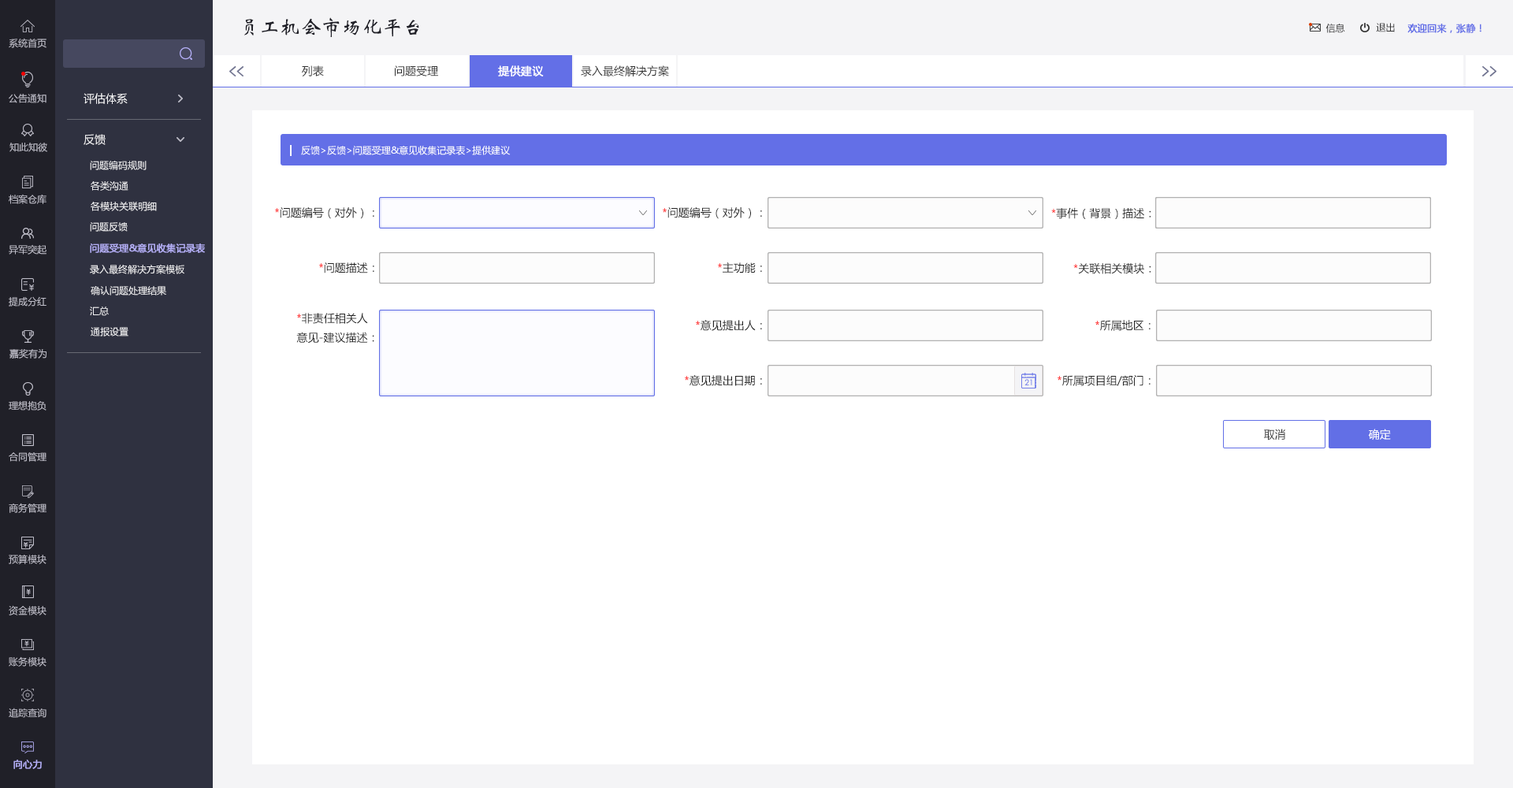
<style>
.page{position:relative;width:1513px;height:788px;background:#ffffff}
.page>*{position:absolute;margin:0}
.t1{font:20.5px "STXinwei";color:#202028}
.t2{font:9.5px "MicrosoftYaHei";color:#333333}
.t3{font:9.5px "MicrosoftYaHei";color:#636fe7;font-weight:bold}
.t4{font:9.5px "MicrosoftYaHei";color:#bfbec9}
.t5{font:11px "MicrosoftYaHei";color:#333333}
.t6{font:11px "MicrosoftYaHei";color:#ffffff;font-weight:bold}
.t7{font:11px "MicrosoftYaHei";color:#f4f4f6}
.t8{font:9.5px "MicrosoftYaHei";color:#ffffff}
.t9{font:9.5px "MicrosoftYaHei";color:#f4f4f6}
.t10{font:11px "MicrosoftYaHei";color:#252525}
.t11{font:11px "MicrosoftYaHei";color:#ff0000}
.t12{font:9.5px "MicrosoftYaHei";color:#b3aef5;font-weight:bold}
.t13{font:11px/14.2px "MicrosoftYaHei";color:#252525}
.t14{font:11px "MicrosoftYaHei";color:#ffffff}
</style>
<div class="page">
<p class="t1" style="left:244px;top:17px;width:175px;height:20px">员工机会市场化平台</p>
<p class="t2" style="left:1326px;top:24px;width:19px;height:9px">信息</p>
<p class="t2" style="left:1376px;top:23px;width:19px;height:9px">退出</p>
<p class="t3" style="left:1407px;top:24px;width:75px;height:9px">欢迎回来，张静！</p>
<p class="t4" style="left:9px;top:38px;width:37px;height:10px">系统首页</p>
<p class="t5" style="left:302px;top:65px;width:22px;height:11px">列表</p>
<p class="t5" style="left:395px;top:65px;width:43px;height:11px">问题受理</p>
<p class="t6" style="left:498px;top:65px;width:46px;height:11px">提供建议</p>
<p class="t5" style="left:581px;top:65px;width:88px;height:11px">录入最终解决方案</p>
<p class="t4" style="left:9px;top:94px;width:37px;height:9px">公告通知</p>
<p class="t7" style="left:84px;top:93px;width:44px;height:11px">评估体系</p>
<p class="t7" style="left:84px;top:134px;width:22px;height:11px">反馈</p>
<p class="t4" style="left:9px;top:143px;width:38px;height:9px">知此知彼</p>
<p class="t8" style="left:301px;top:146px;width:210px;height:9px">反馈&gt;反馈&gt;问题受理&amp;意见收集记录表&gt;提供建议</p>
<p class="t9" style="left:90px;top:161px;width:57px;height:9px">问题编码规则</p>
<p class="t9" style="left:91px;top:181px;width:37px;height:10px">各类沟通</p>
<p class="t4" style="left:9px;top:194px;width:37px;height:10px">档案仓库</p>
<p class="t9" style="left:91px;top:202px;width:66px;height:9px">各模块关联明细</p>
<p class="t10" style="left:275px;top:207px;width:99px;height:12px"><span class="t11">*</span>问题编号（对外）：</p>
<p class="t10" style="left:663px;top:207px;width:99px;height:12px"><span class="t11">*</span>问题编号（对外）：</p>
<p class="t10" style="left:1051px;top:207px;width:100px;height:12px"><span class="t11">*</span>事件（背景）描述：</p>
<p class="t9" style="left:90px;top:222px;width:38px;height:10px">问题反馈</p>
<p class="t4" style="left:9px;top:244px;width:37px;height:11px">异军突起</p>
<p class="t12" style="left:90px;top:244px;width:115px;height:9px">问题受理&amp;意见收集记录表</p>
<p class="t9" style="left:90px;top:264px;width:94px;height:10px">录入最终解决方案模板</p>
<p class="t10" style="left:319px;top:262px;width:55px;height:11px"><span class="t11">*</span>问题描述：</p>
<p class="t10" style="left:718px;top:262px;width:44px;height:11px"><span class="t11">*</span>主功能：</p>
<p class="t10" style="left:1073px;top:262px;width:78px;height:12px">*关联相关模块：</p>
<p class="t9" style="left:91px;top:286px;width:75px;height:10px">确认问题处理结果</p>
<p class="t4" style="left:9px;top:296px;width:37px;height:11px">提成分红</p>
<p class="t9" style="left:90px;top:307px;width:19px;height:9px">汇总</p>
<p class="t13" style="left:296px;top:313px;width:78px;height:31px"><span class="t11">*</span>非责任相关人<br>意见-建议描述：</p>
<p class="t9" style="left:91px;top:327px;width:37px;height:10px">通报设置</p>
<p class="t10" style="left:696px;top:320px;width:66px;height:11px"><span class="t11">*</span>意见提出人：</p>
<p class="t10" style="left:1095px;top:320px;width:56px;height:11px"><span class="t11">*</span>所属地区：</p>
<p class="t4" style="left:9px;top:349px;width:37px;height:10px">嘉奖有为</p>
<p class="t10" style="left:685px;top:375px;width:77px;height:11px"><span class="t11">*</span>意见提出日期：</p>
<p class="t10" style="left:1058px;top:375px;width:93px;height:11px"><span class="t11">*</span>所属项目组/部门：</p>
<p class="t4" style="left:9px;top:401px;width:37px;height:10px">理想抱负</p>
<p class="t5" style="left:1264px;top:429px;width:21px;height:12px">取消</p>
<p class="t14" style="left:1368px;top:429px;width:23px;height:12px">确定</p>
<p class="t4" style="left:9px;top:452px;width:37px;height:10px">合同管理</p>
<p class="t4" style="left:9px;top:503px;width:37px;height:10px">商务管理</p>
<p class="t4" style="left:9px;top:555px;width:37px;height:9px">预算模块</p>
<p class="t4" style="left:9px;top:605px;width:37px;height:10px">资金模块</p>
<p class="t4" style="left:9px;top:656px;width:37px;height:11px">账务模块</p>
<p class="t4" style="left:9px;top:708px;width:37px;height:10px">追踪查询</p>
<p class="t12" style="left:13px;top:760px;width:29px;height:9px">向心力</p>
</div>
